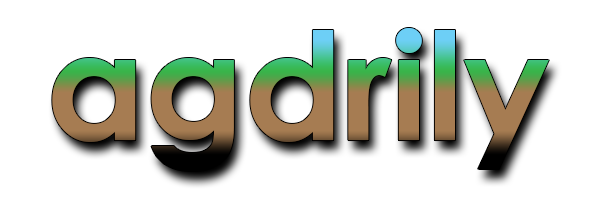
<style>
.page{position:relative;width:600px;height:200px;background:#ffffff}
.page>*{position:absolute;margin:0}
.t1{font:150px "CenturyGothic-Bold"}
</style>
<div class="page">
<p class="t1" style="left:52px;top:28px;width:497px;height:143px">agdrily</p>
</div>
